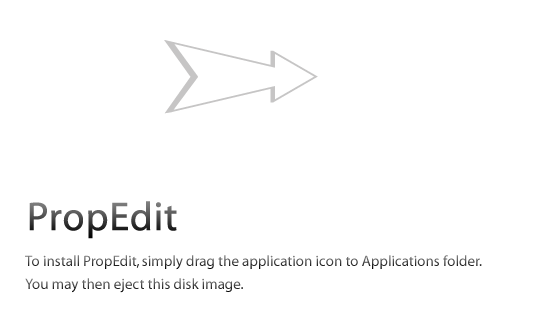
<style>
.page{position:relative;width:547px;height:332px;background:#ffffff}
.page>*{position:absolute;margin:0}
.t1{font:40px "Myriad-Roman";font-weight:bold}
.t2{font:15px "Myriad-Roman"}
</style>
<div class="page">
<p class="t1" style="left:29px;top:201px;width:148px;height:38px">PropEdit</p>
<p class="t2" style="left:25px;top:255px;width:457px;height:15px">To install PropEdit, simply drag the application icon to Applications folder.</p>
<p class="t2" style="left:25px;top:278px;width:218px;height:15px">You may then eject this disk image.</p>
</div>
